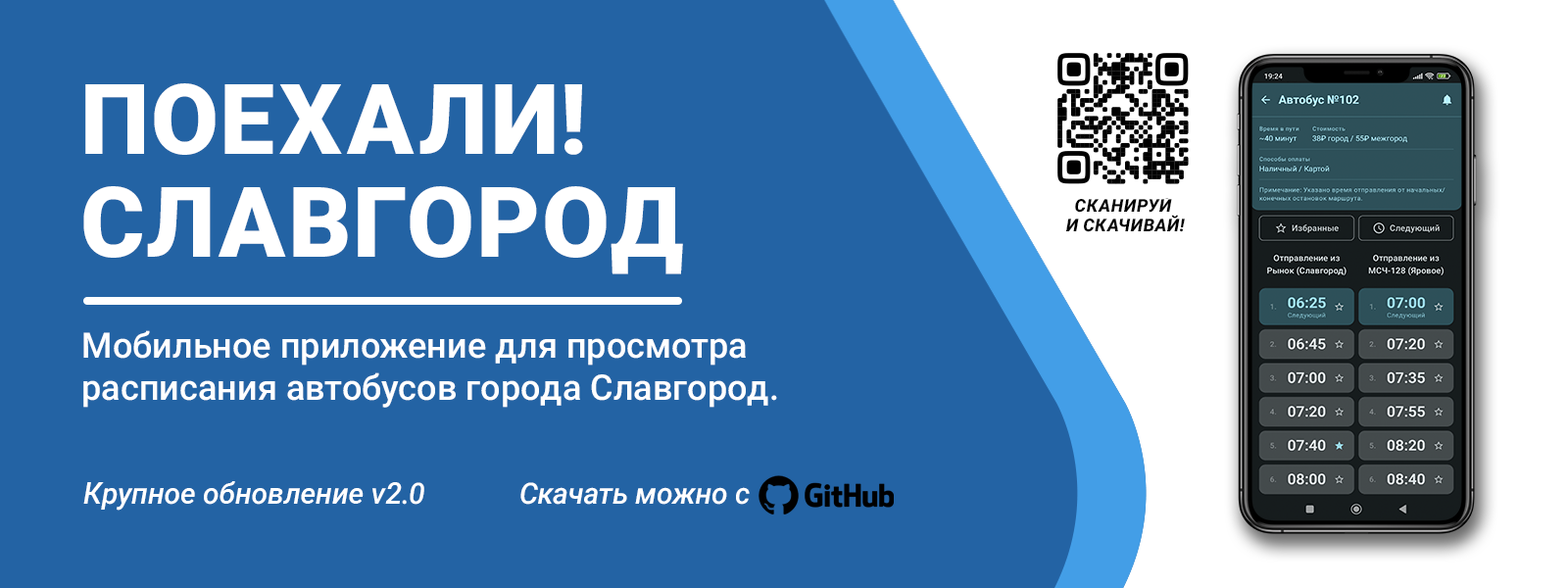
<style>
.page{position:relative;width:1568px;height:588px;background:#2363a4}
.page>*{position:absolute;margin:0}
.t1{font:97.9px/102.8px "Roboto-Black";color:#ffffff;text-transform:uppercase}
.t2{font:17.7px/19.9px "Roboto-ExtraBoldItalic";color:#000000;text-transform:uppercase}
.t3{font:35.2px "Roboto-Medium";color:#ffffff}
.t4{font:29.4px "Roboto-MediumItalic";color:#ffffff}
</style>
<div class="page">
<p class="t1" style="left:83px;top:83px;width:600px;height:191px">Поехали!<br>Славгород</p>
<p class="t2" style="left:1066px;top:195px;width:119px;height:37px;text-align:center">Сканируй<br> и скачивай!</p>
<p class="t3" style="left:83px;top:330px;width:694px;height:78px">Мобильное приложение для просмотра<br>расписания автобусов города Славгород.</p>
<p class="t4" style="left:83px;top:481px;width:341px;height:30px">Крупное обновление v2.0</p>
<p class="t4" style="left:520px;top:482px;width:230px;height:23px">Скачать можно с</p>
</div>
